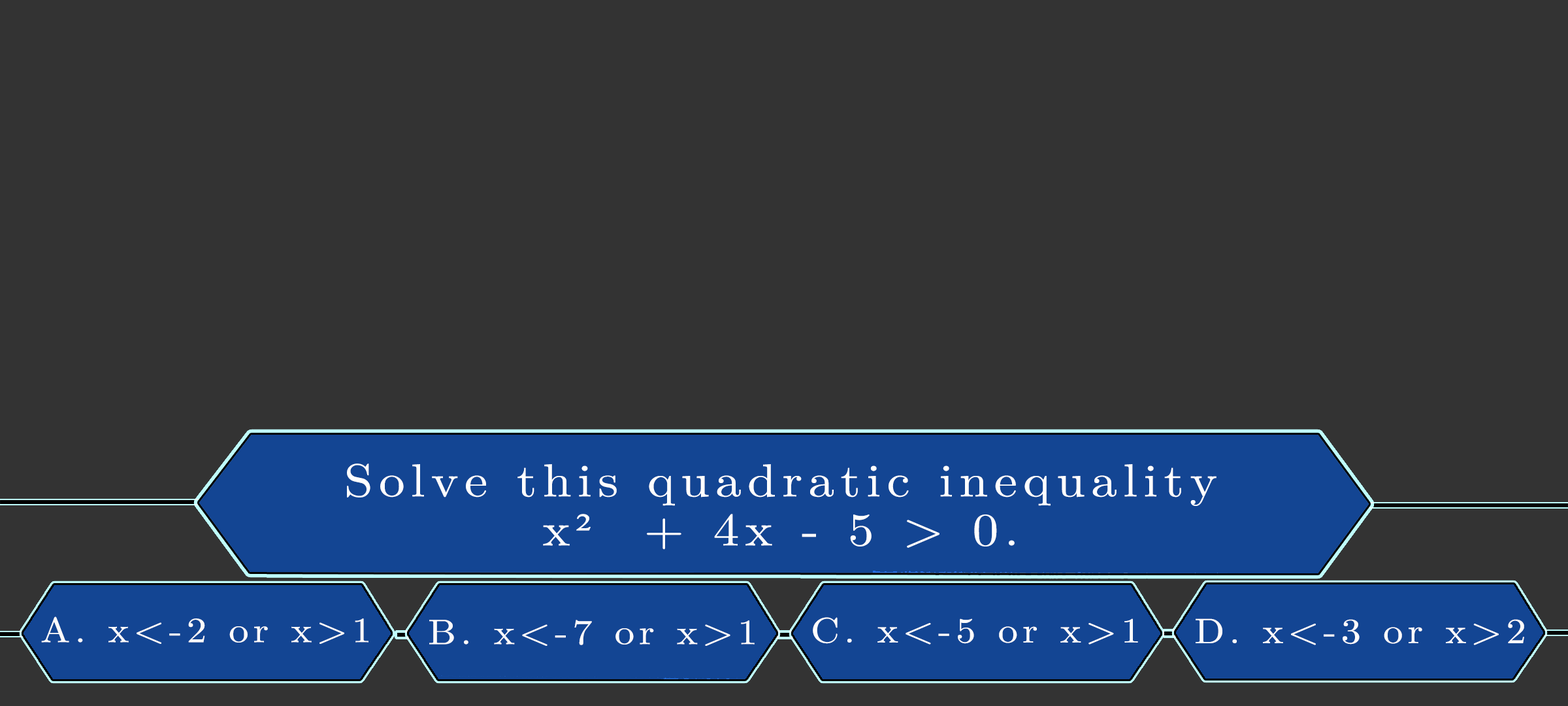
<style>
.page{position:relative;width:1568px;height:706px;background:#333333}
.page>*{position:absolute;margin:0}
.t1{font:46.3px/49px "LatinModernMath-Regular";letter-spacing:0.115em;color:#ffffff;scale:1.12 1}
.t2{font:46.3px/49px "TimesNewRomanPSMT";letter-spacing:0.115em;color:#ffffff;scale:1.12 1}
.t3{font:35.4px "LatinModernMath-Regular";letter-spacing:0.115em;color:#fcfbfb;scale:1.12 1}
.t4{font:35.4px "LatinModernMath-Regular";letter-spacing:0.115em;color:#fcfbfb;text-transform:uppercase;scale:1.12 1}
.t5{font:35.4px "LatinModernMath-Regular";letter-spacing:0.115em;color:#fffefe;scale:1.12 1}
.t6{font:35.4px "LatinModernMath-Regular";letter-spacing:0.115em;color:#fffefe;text-transform:uppercase;scale:1.12 1}
.t7{font:35.4px "LatinModernMath-Regular";letter-spacing:0.115em;color:#fefcfc;scale:1.12 1}
.t8{font:35.4px "LatinModernMath-Regular";letter-spacing:0.115em;color:#fefcfc;text-transform:uppercase;scale:1.12 1}
</style>
<div class="page">
<p class="t1" style="left:347px;top:463px;width:870px;height:86px;text-align:center">Solve this quadratic inequality<br>x<span class="t2">²</span>  + 4x - 5 &gt; 0.</p>
<p class="t3" style="left:41px;top:616px;width:327px;height:28px"><span class="t4">a.</span> x&lt;-2 or x&gt;1</p>
<p class="t5" style="left:813px;top:617px;width:325px;height:27px"><span class="t6">c. </span>x&lt;-5 or x&gt;1</p>
<p class="t7" style="left:429px;top:619px;width:326px;height:26px"><span class="t8">b. </span>x&lt;-7 or x&gt;1</p>
<p class="t7" style="left:1196px;top:618px;width:328px;height:27px"><span class="t8">d. </span>x&lt;-3 or x&gt;2</p>
</div>
